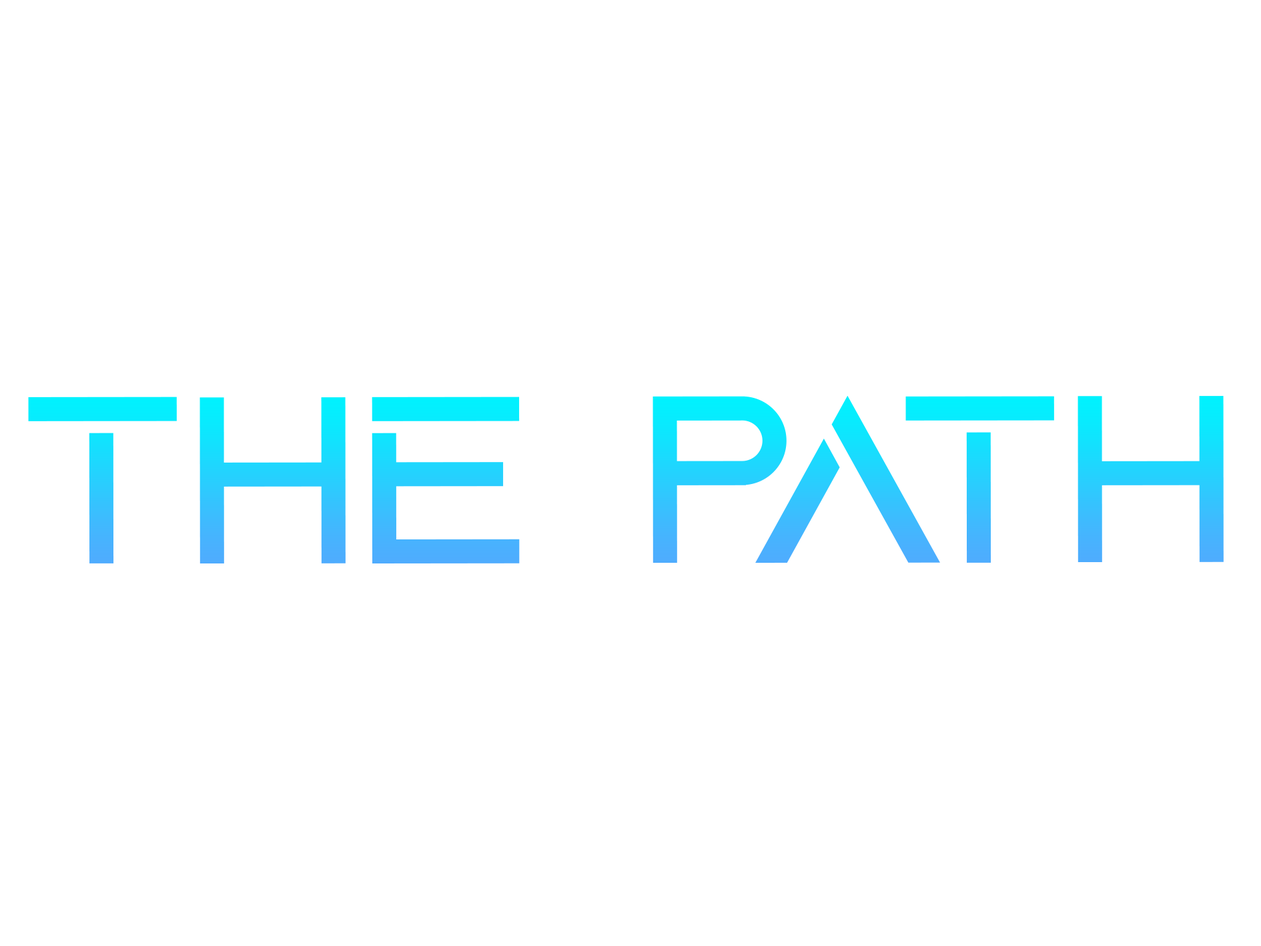
<style>
.page{position:relative;width:1261px;height:946px;background:#ffffff}
.page>*{position:absolute;margin:0}
.t1{font:250.2px "AquireRegular"}
</style>
<div class="page">
<p class="t1" style="left:28px;top:395px;width:1196px;height:168px">THE PATH</p>
</div>
